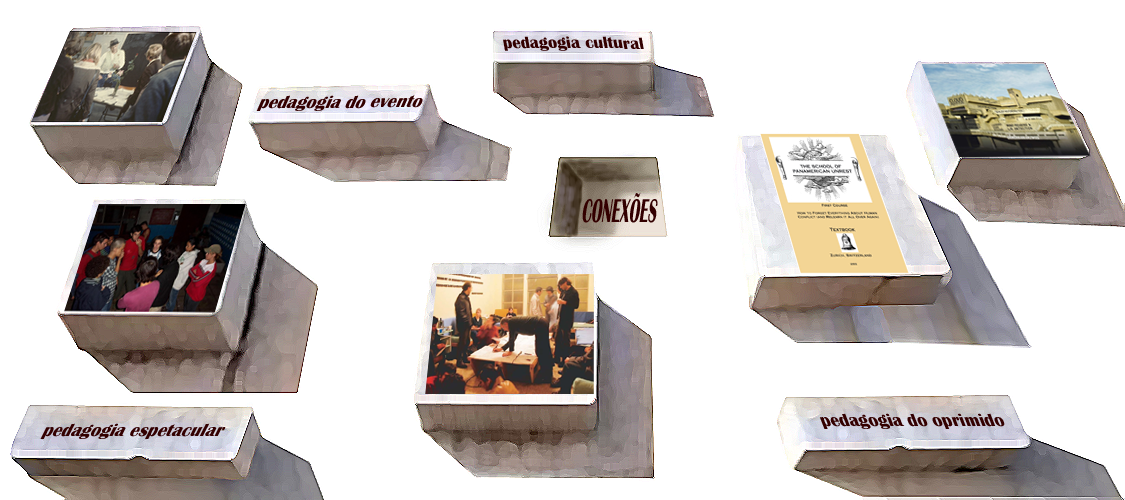
<style>
.page{position:relative;width:1125px;height:500px;background:#ffffff}
.page>*{position:absolute;margin:0}
.t1{font:17.3px "BritannicBold";color:#330000}
.t2{font:19.7px "BritannicBold";color:#330000;scale:0.91 1}
.t3{font:34.4px "BritannicBold";color:#330000;scale:0.46 1}
.t4{font:19.4px "BritannicBold";color:#330000;scale:0.93 1}
.t5{font:20.2px "BritannicBold";color:#330000;scale:0.89 1}
</style>
<div class="page">
<p class="t1" style="left:503px;top:36px;width:141px;height:15px">pedagogia cultural</p>
<p class="t2" style="left:256px;top:95px;width:167px;height:16px">pedagogia do evento</p>
<p class="t3" style="left:582px;top:192px;width:76px;height:31px">CONEXÕES</p>
<p class="t4" style="left:819px;top:413px;width:186px;height:16px">pedagogia do oprimido</p>
<p class="t5" style="left:40px;top:423px;width:186px;height:16px">pedagogia espetacular</p>
</div>
